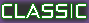
<style>
.page{position:relative;width:89px;height:23px;background:#147d11}
.page>*{position:absolute;margin:0}
.t1{font:18.9px "Anita--Semi-square";color:#ffffff;scale:0.95 1}
</style>
<div class="page">
<p class="t1" style="left:2px;top:4px;width:84px;height:14px">CLASSIC</p>
</div>
